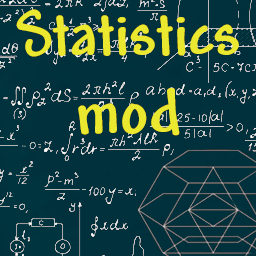
<style>
.page{position:relative;width:256px;height:256px;background:#00313c}
.page>*{position:absolute;margin:0}
.t1{font:66px "Andy-Bold";color:#ebe92f}
</style>
<div class="page">
<p class="t1" style="left:16px;top:9px;width:223px;height:127px;text-align:center">Statistics<br>mod</p>
</div>
